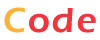
<style>
.page{position:relative;width:100px;height:40px;background:#ffffff}
.page>*{position:absolute;margin:0}
.t1{font:36px "ErasITC-Demi";letter-spacing:0.05em;color:#f0353d}
.t2{font:36px "ErasITC-Demi";letter-spacing:0.05em;color:#fbb239}
</style>
<div class="page">
<p class="t1" style="left:4px;top:7px;width:92px;height:26px"><span class="t2">C</span>ode</p>
</div>
